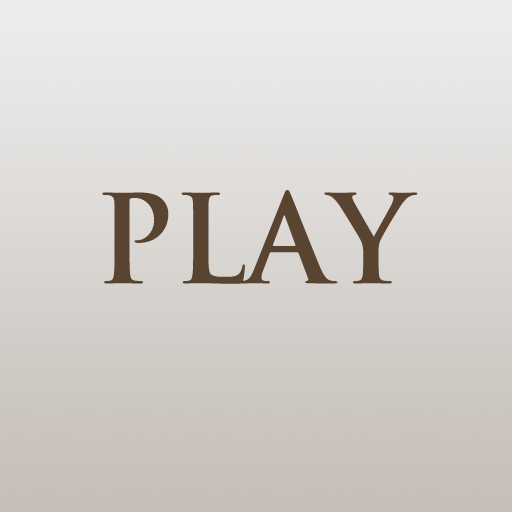
<style>
.page{position:relative;width:512px;height:512px}
.page>*{position:absolute;margin:0}
.t1{font:120px "TrajanPro-Bold";color:#594431}
</style>
<div class="page">
<p class="t1" style="left:102px;top:190px;width:316px;height:94px">PLAY</p>
</div>
